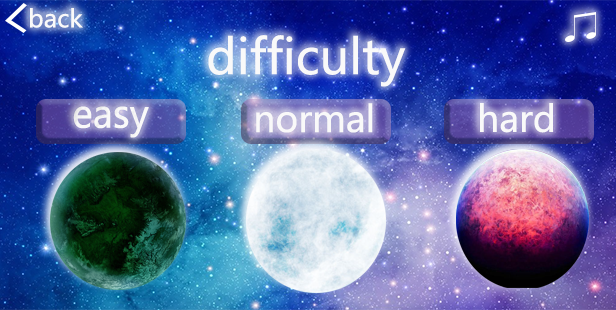
<style>
.page{position:relative;width:616px;height:310px}
.page>*{position:absolute;margin:0}
.t1{font:24px "MicrosoftYaHeiUI";color:#f9f9f9}
.t2{font:48px "MicrosoftYaHeiUI";color:#f9f9f9}
.t3{font:38.3px "MicrosoftYaHeiUI";color:#f9f9f9;scale:0.95 1}
.t4{font:36px "MicrosoftYaHeiUI";color:#f9f9f9}
</style>
<div class="page">
<p class="t1" style="left:30px;top:8px;width:53px;height:20px">back</p>
<p class="t2" style="left:208px;top:35px;width:198px;height:52px">difficulty</p>
<p class="t3" style="left:73px;top:106px;width:76px;height:32px">easy</p>
<p class="t4" style="left:256px;top:103px;width:117px;height:30px">normal</p>
<p class="t4" style="left:480px;top:103px;width:73px;height:30px">hard</p>
</div>
